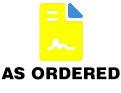
<style>
.page{position:relative;width:121px;height:93px;background:#ffffff}
.page>*{position:absolute;margin:0}
.t1{font:16.7px "Swiss721BT-Black";letter-spacing:0.005em;color:#000000}
</style>
<div class="page">
<p class="t1" style="left:1px;top:67px;width:119px;height:13px">AS ORDERED</p>
</div>
